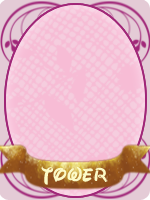
<style>
.page{position:relative;width:150px;height:200px}
.page>*{position:absolute;margin:0}
.t1{font:37.4px "Waltograph";color:#fcfac7}
</style>
<div class="page">
<p class="t1" style="left:41px;top:166px;width:66px;height:19px">tower</p>
</div>
